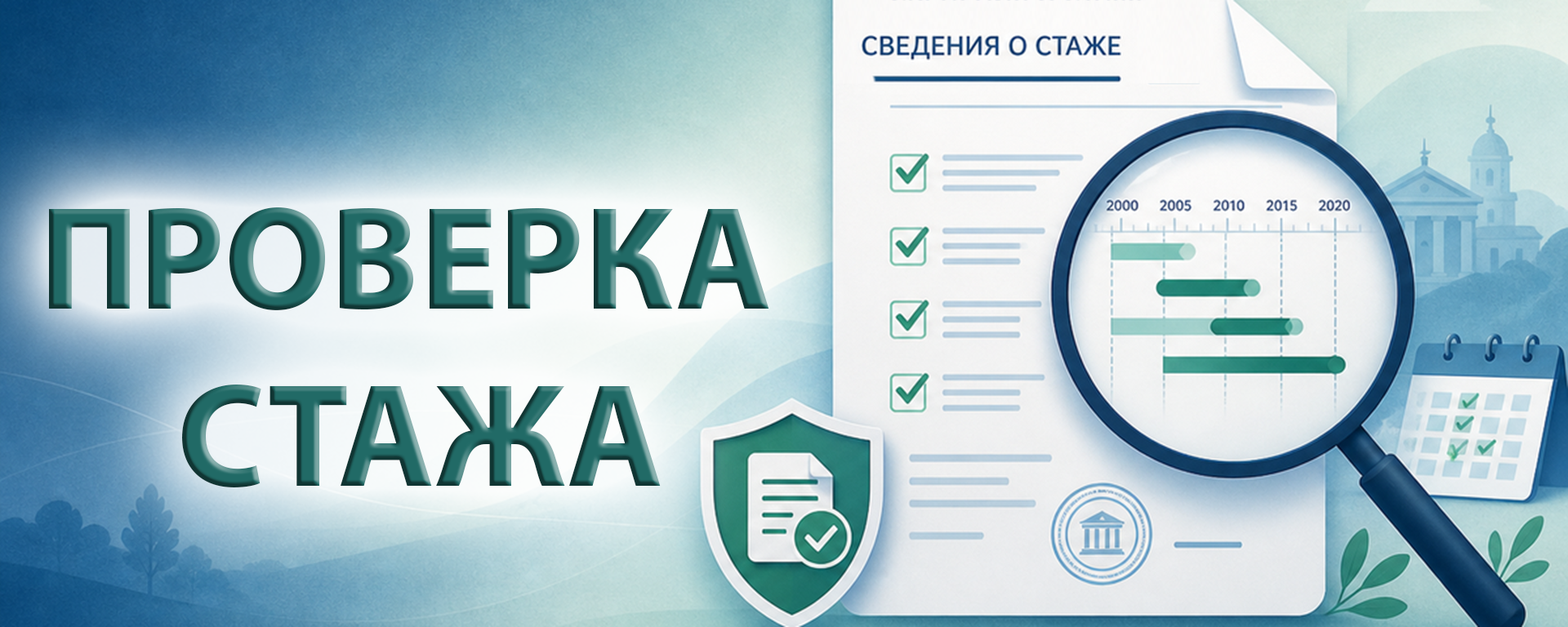
<style>
.page{position:relative;width:1568px;height:627px}
.page>*{position:absolute;margin:0}
.t1{font:147.6px "MyriadPro-Bold"}
</style>
<div class="page">
<p class="t1" style="left:49px;top:207px;width:720px;height:281px;text-align:center">ПРОВЕРКА <br>СТАЖА</p>
</div>
